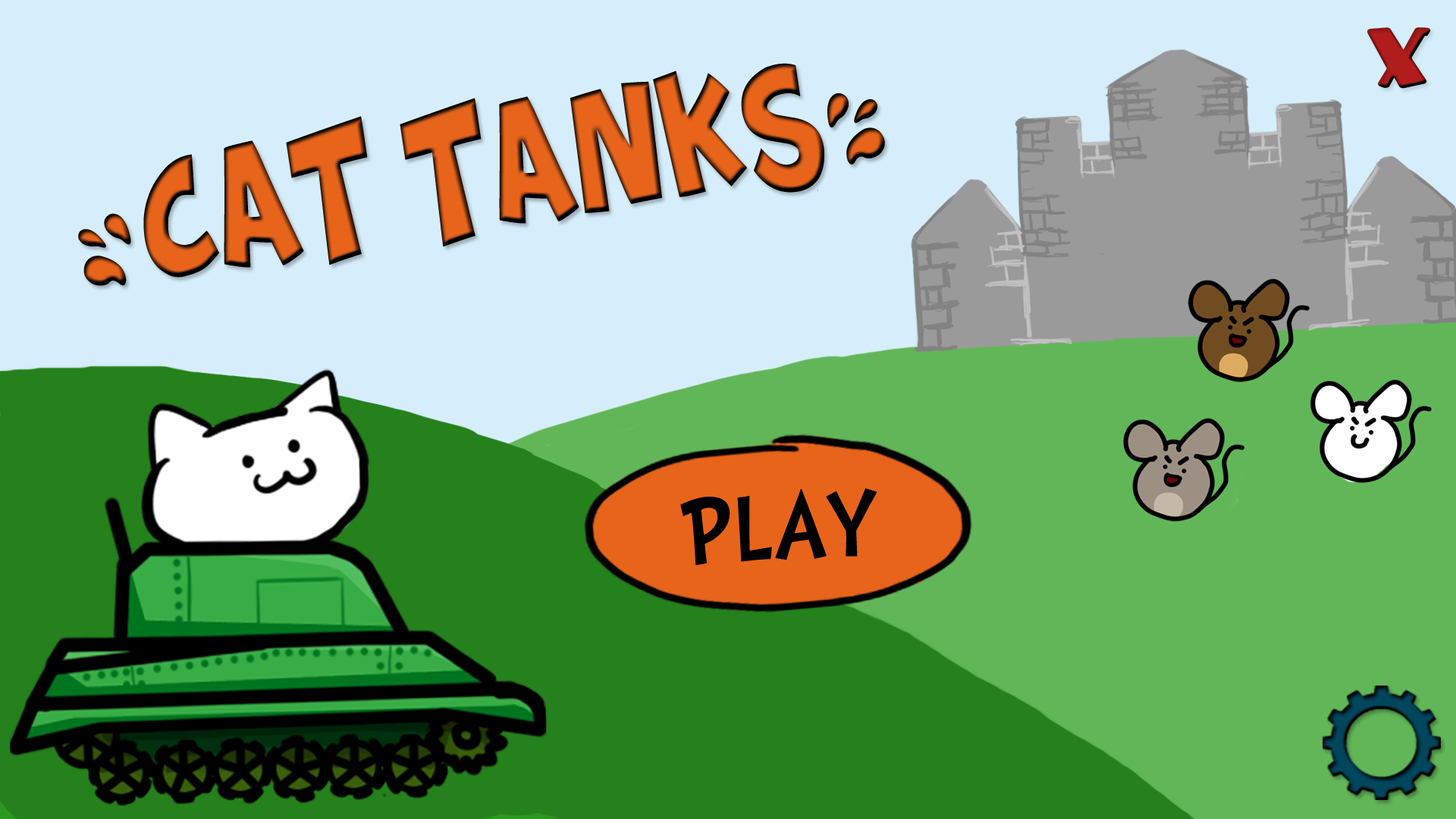
<style>
.page{position:relative;width:1456px;height:819px;background:#d6eefb}
.page>*{position:absolute;margin:0}
.t1{font:83.8px "KidsZone";color:#b11c1c;scale:1.53 1}
.t2{font:99.9px "Splatch";scale:0.86 1}
.t3{font:117.6px "DoctorSoosLight";color:#000000;scale:0.92 1}
</style>
<div class="page">
<p class="t1" style="left:1367px;top:27px;width:64px;height:62px">x</p>
<p class="t2" style="left:78px;top:63px;width:807px;height:223px;rotate:-9deg">&lt;CAT TANKS&gt;</p>
<p class="t3" style="left:680px;top:488px;width:197px;height:78px;rotate:-3deg">PLAY</p>
</div>
